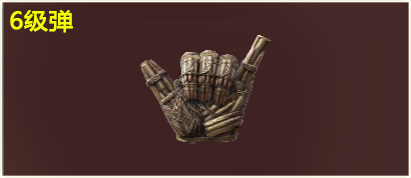
<style>
.page{position:relative;width:411px;height:178px}
.page>*{position:absolute;margin:0}
.t1{font:24px "MicrosoftYaHeiUI";color:#f4ff00;font-weight:bold}
</style>
<div class="page">
<p class="t1" style="left:10px;top:10px;width:63px;height:23px">6级弹</p>
</div>
